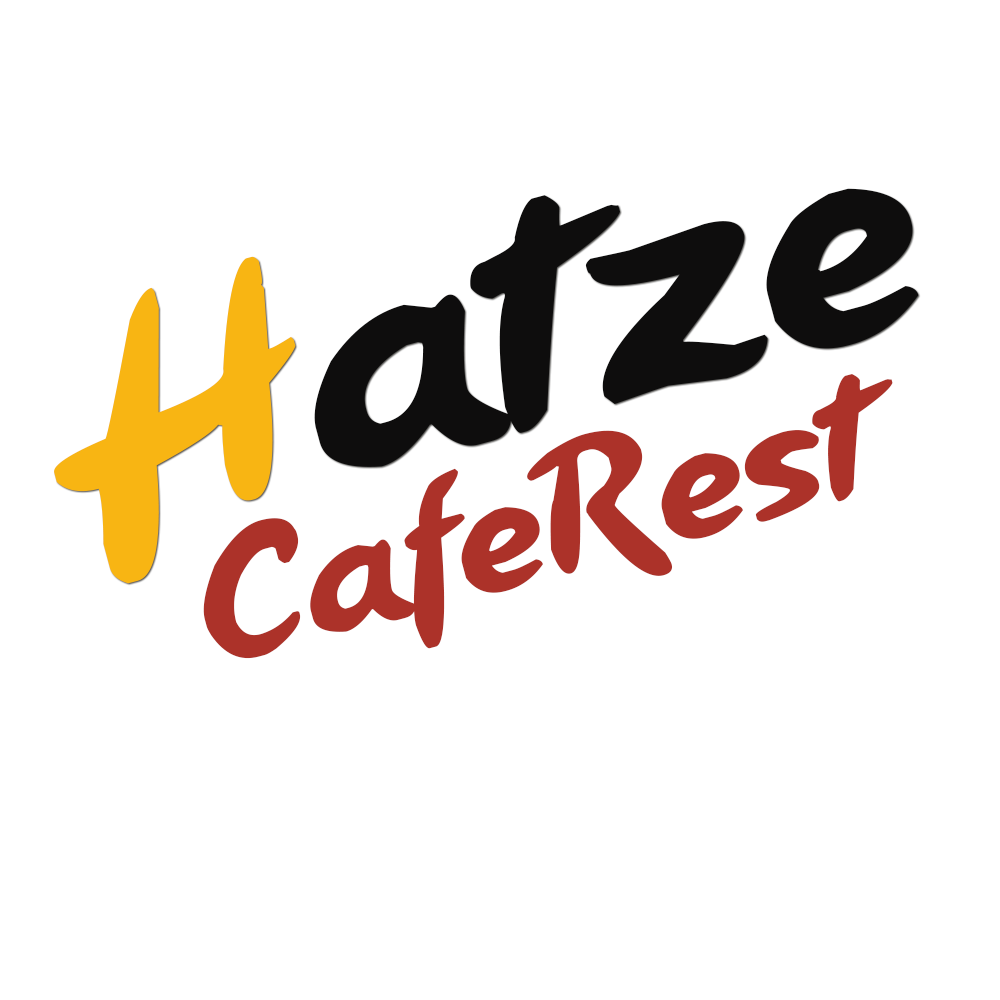
<style>
.page{position:relative;width:1000px;height:1000px;background:#ffffff}
.page>*{position:absolute;margin:0}
.t1{font:348.8px "PizzaHutFont";letter-spacing:0.025em;color:#0e0d0d}
.t2{font:348.8px "PizzaHutFont";letter-spacing:0.025em;color:#f8b513}
.t3{font:186.9px "PizzaHutFont";letter-spacing:0.025em;color:#ac3229}
</style>
<div class="page">
<p class="t1" style="left:54px;top:188px;width:865px;height:396px;rotate:-15deg"><span class="t2">H</span>atze</p>
<p class="t3" style="left:203px;top:374px;width:690px;height:285px;rotate:-15deg">CafeRest</p>
</div>
